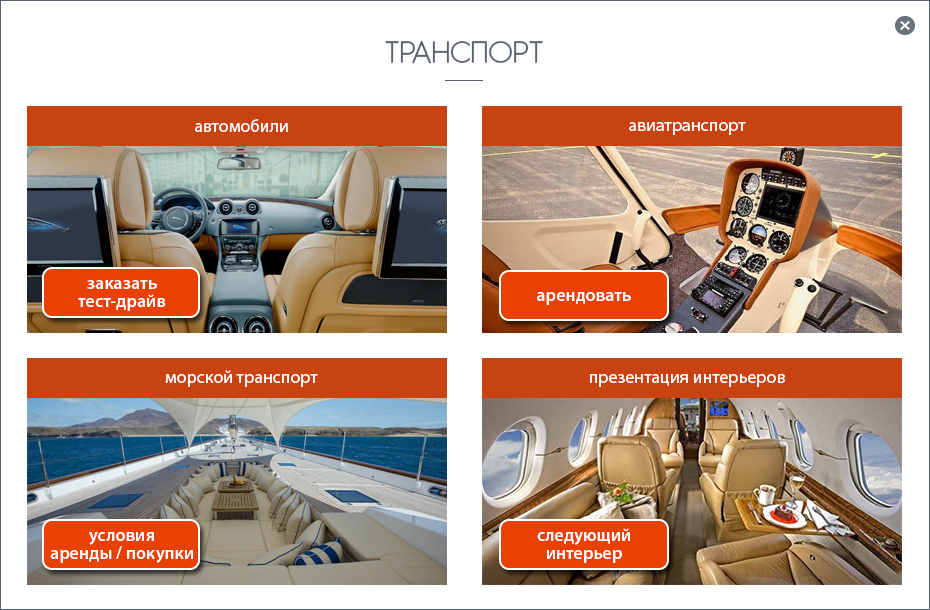
<style>
.page{position:relative;width:930px;height:610px;background:#ffffff}
.page>*{position:absolute;margin:0}
.t1{font:30px "GardensC";color:#59626f;text-transform:uppercase}
.t2{font:18.2px "MyriadPro-Regular";color:#ffffff}
.t3{font:18px "MyriadPro-Regular";color:#ffffff}
.t4{font:18px/18px "MyriadPro-Semibold";color:#ffffff}
.t5{font:18px "MyriadPro-Semibold";color:#ffffff}
</style>
<div class="page">
<p class="t1" style="left:385px;top:41px;width:158px;height:23px">Транспорт</p>
<p class="t2" style="left:195px;top:119px;width:93px;height:13px">автомобили</p>
<p class="t3" style="left:629px;top:122px;width:117px;height:13px">авиатранспорт</p>
<p class="t4" style="left:78px;top:280px;width:88px;height:31px;text-align:center">заказать<br>тест-драйв</p>
<p class="t5" style="left:537px;top:292px;width:94px;height:13px">арендовать</p>
<p class="t2" style="left:165px;top:370px;width:153px;height:17px">морской транспорт</p>
<p class="t2" style="left:590px;top:374px;width:195px;height:13px">презентация интерьеров</p>
<p class="t4" style="left:50px;top:532px;width:143px;height:31px;text-align:center">условия<br>аренды / покупки</p>
<p class="t4" style="left:537px;top:528px;width:93px;height:35px;text-align:center">следующий<br>интерьер</p>
</div>
